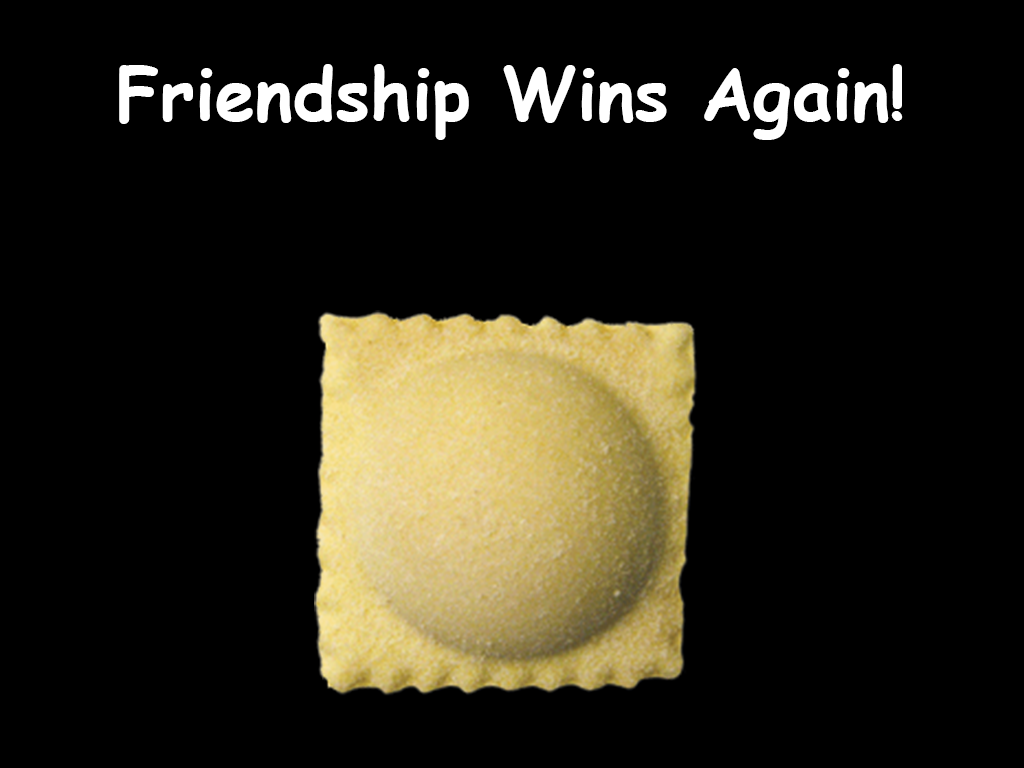
<style>
.page{position:relative;width:1024px;height:768px;background:#000000}
.page>*{position:absolute;margin:0}
.t1{font:72px "ComicSansMS-Bold";color:#ffffff}
</style>
<div class="page">
<p class="t1" style="left:119px;top:64px;width:784px;height:76px">Friendship Wins Again!</p>
</div>
